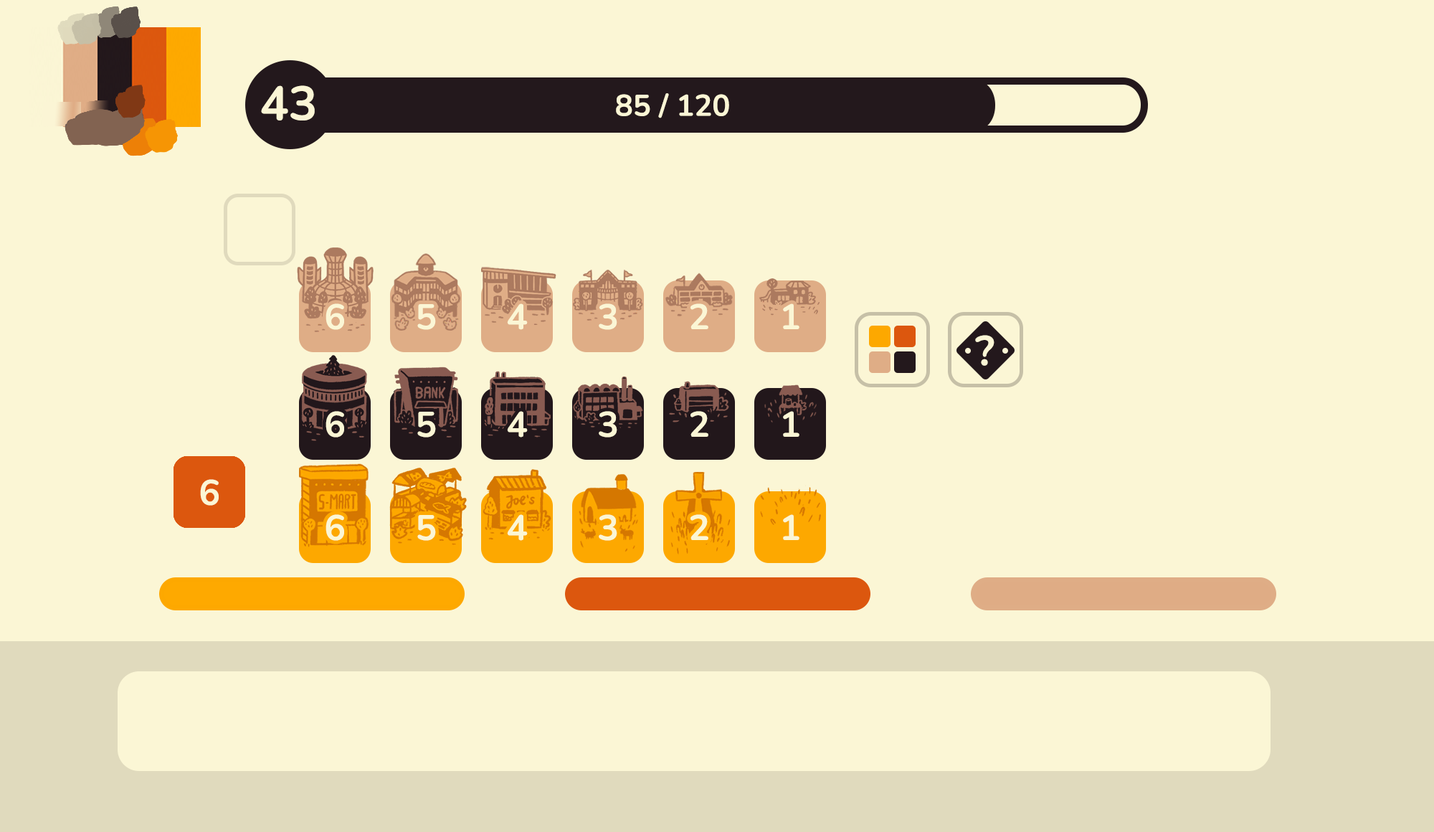
<style>
.page{position:relative;width:1434px;height:832px;background:#fbf6d5}
.page>*{position:absolute;margin:0}
.t1{font:47.8px "Nunito-Bold";color:#fbf5d5;font-weight:bold}
.t2{font:29.9px "Nunito-Bold";color:#fbf6d5;font-weight:bold}
.t3{font:35.5px "Nunito-Bold";color:#fbf6d5;font-weight:bold}
.t4{font:41.8px "Nunito-Bold";color:#fbf6d5;font-weight:bold}
</style>
<div class="page">
<p class="t1" style="left:261px;top:85px;width:54px;height:35px">43</p>
<p class="t2" style="left:616px;top:93px;width:113px;height:25px">85 / 120</p>
<p class="t3" style="left:325px;top:303px;width:19px;height:27px">6</p>
<p class="t3" style="left:417px;top:304px;width:19px;height:26px">5</p>
<p class="t3" style="left:507px;top:303px;width:21px;height:27px">4</p>
<p class="t3" style="left:599px;top:303px;width:18px;height:27px">3</p>
<p class="t3" style="left:690px;top:303px;width:18px;height:26px">2</p>
<p class="t3" style="left:783px;top:303px;width:16px;height:26px">1</p>
<p class="t4" style="left:975px;top:335px;width:19px;height:31px">?</p>
<p class="t3" style="left:325px;top:411px;width:19px;height:26px">6</p>
<p class="t3" style="left:417px;top:412px;width:19px;height:25px">5</p>
<p class="t3" style="left:507px;top:411px;width:21px;height:26px">4</p>
<p class="t3" style="left:599px;top:411px;width:18px;height:26px">3</p>
<p class="t3" style="left:690px;top:411px;width:18px;height:26px">2</p>
<p class="t3" style="left:783px;top:411px;width:16px;height:26px">1</p>
<p class="t3" style="left:200px;top:479px;width:19px;height:26px">6</p>
<p class="t3" style="left:201px;top:481px;width:18px;height:26px">5</p>
<p class="t3" style="left:325px;top:514px;width:19px;height:27px">6</p>
<p class="t3" style="left:417px;top:515px;width:19px;height:26px">5</p>
<p class="t3" style="left:507px;top:514px;width:21px;height:27px">4</p>
<p class="t3" style="left:599px;top:514px;width:18px;height:27px">3</p>
<p class="t3" style="left:690px;top:514px;width:18px;height:26px">2</p>
<p class="t3" style="left:783px;top:514px;width:16px;height:26px">1</p>
</div>
